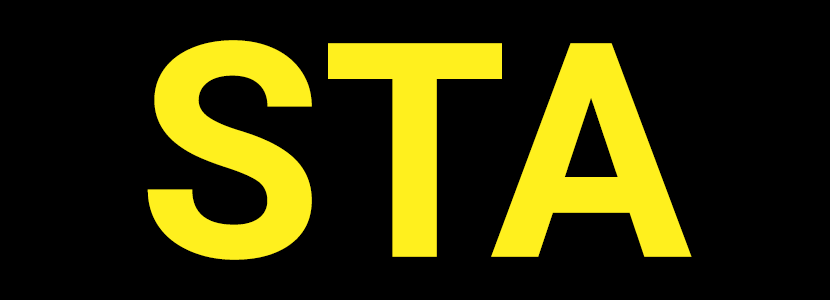
<style>
.page{position:relative;width:830px;height:300px;background:#000000}
.page>*{position:absolute;margin:0}
.t1{font:300px "Roboto-Bold";color:#fff01e}
</style>
<div class="page">
<p class="t1" style="left:147px;top:40px;width:545px;height:220px">STA</p>
</div>
